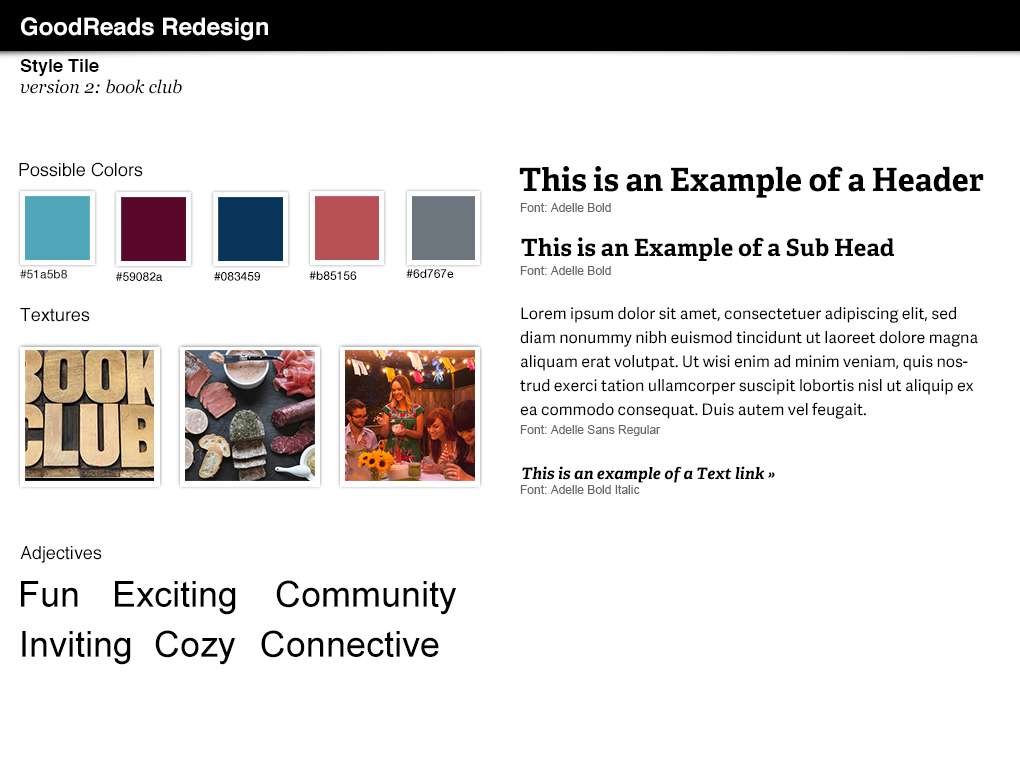
<style>
.page{position:relative;width:1020px;height:760px;background:#ffffff}
.page>*{position:absolute;margin:0}
.t1{font:24px "Helvetica-Bold";color:#ffffff}
.t2{font:18px "Helvetica-Bold";color:#000000}
.t3{font:18px "Georgia-Italic";color:#000000}
.t4{font:18px "Helvetica";color:#000000}
.t5{font:32px "Adelle-Bold";color:#000000}
.t6{font:12px "ArialMT";color:#666666}
.t7{font:24px "Adelle-Bold";color:#000000}
.t8{font:12px "HelveticaNeue-Medium";color:#282828}
.t9{font:12px "HelveticaNeue-Medium";color:#000000}
.t10{font:16px/24px "AdelleSans-Regular";color:#000000}
.t11{font:16px "Adelle-BoldItalic";color:#000000}
.t12{font:36px "ArialMT";color:#000000}
</style>
<div class="page">
<p class="t1" style="left:21px;top:17px;width:247px;height:24px">GoodReads Redesign</p>
<p class="t2" style="left:20px;top:59px;width:79px;height:17px">Style Tile</p>
<p class="t3" style="left:20px;top:79px;width:162px;height:15px">version 2: book club</p>
<p class="t4" style="left:19px;top:162px;width:124px;height:15px">Possible Colors</p>
<p class="t5" style="left:519px;top:166px;width:465px;height:32px">This is an Example of a Header</p>
<p class="t6" style="left:520px;top:203px;width:91px;height:9px">Font: Adelle Bold</p>
<p class="t7" style="left:521px;top:237px;width:373px;height:24px">This is an Example of a Sub Head</p>
<p class="t8" style="left:20px;top:269px;width:47px;height:10px">#51a5b8</p>
<p class="t9" style="left:406px;top:269px;width:48px;height:9px">#6d767e</p>
<p class="t6" style="left:520px;top:266px;width:91px;height:9px">Font: Adelle Bold</p>
<p class="t9" style="left:116px;top:272px;width:47px;height:9px">#59082a</p>
<p class="t9" style="left:214px;top:272px;width:46px;height:9px">#083459</p>
<p class="t9" style="left:309px;top:271px;width:48px;height:9px">#b85156</p>
<p class="t4" style="left:20px;top:308px;width:70px;height:14px">Textures</p>
<p class="t10" style="left:520px;top:307px;width:458px;height:112px">Lorem ipsum dolor sit amet, consectetuer adipiscing elit, sed diam nonummy nibh euismod tincidunt ut laoreet dolore magna aliquam erat volutpat. Ut wisi enim ad minim veniam, quis nostrud exerci tation ullamcorper suscipit lobortis nisl ut aliquip ex ea commodo consequat. Duis autem vel feugait.</p>
<p class="t6" style="left:520px;top:425px;width:141px;height:11px">Font: Adelle Sans Regular</p>
<p class="t11" style="left:522px;top:466px;width:253px;height:17px">This is an example of a Text link »</p>
<p class="t6" style="left:520px;top:485px;width:120px;height:9px">Font: Adelle Bold Italic</p>
<p class="t4" style="left:20px;top:546px;width:82px;height:17px">Adjectives</p>
<p class="t12" style="left:21px;top:581px;width:57px;height:26px">Fun</p>
<p class="t12" style="left:115px;top:581px;width:121px;height:34px">Exciting</p>
<p class="t12" style="left:276px;top:580px;width:181px;height:35px">Community</p>
<p class="t12" style="left:155px;top:630px;width:81px;height:35px">Cozy</p>
<p class="t12" style="left:261px;top:630px;width:178px;height:28px">Connective</p>
<p class="t12" style="left:22px;top:631px;width:109px;height:34px">Inviting</p>
</div>
